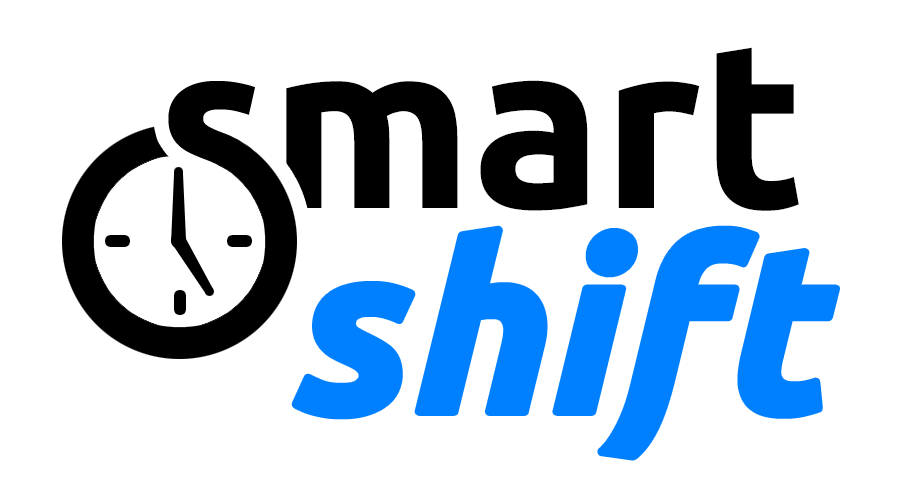
<style>
.page{position:relative;width:900px;height:500px;background:#ffffff}
.page>*{position:absolute;margin:0}
.t1{font:235px "Ubuntu-Bold";color:#000000}
.t2{font:235px "Ubuntu-BoldItalic";letter-spacing:0.01em;color:#0080ff}
</style>
<div class="page">
<p class="t1" style="left:286px;top:47px;width:513px;height:164px">mart</p>
<p class="t2" style="left:295px;top:229px;width:542px;height:228px">shift</p>
</div>
